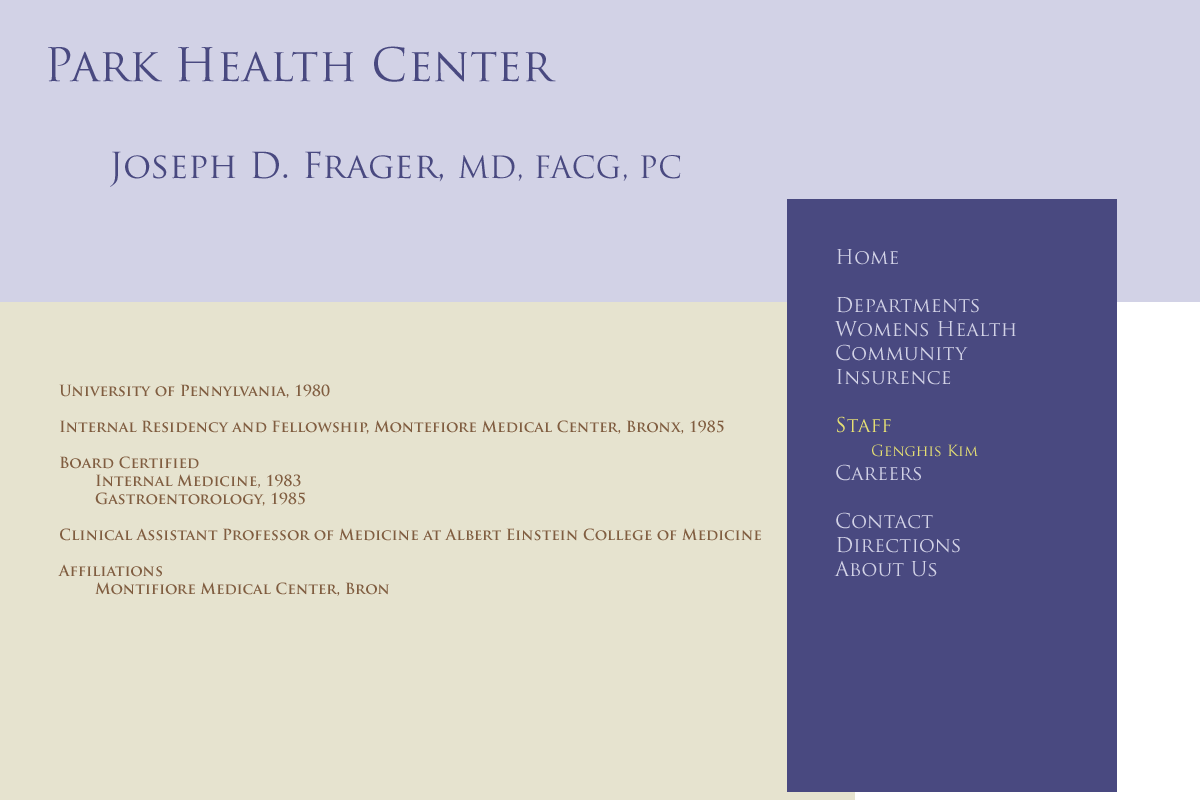
<style>
.page{position:relative;width:1200px;height:800px;background:#e6e3cf}
.page>*{position:absolute;margin:0}
.t1{font:45px "TrajanPro-Regular";color:#494980}
.t2{font:35px "TrajanPro-Regular";color:#494980}
.t3{font:30px "TrajanPro-Regular";color:#494980}
.t4{font:20px "TrajanPro-Regular";color:#d2d2e6}
.t5{font:20px "TrajanPro-Regular";color:#e6e073}
.t6{font:15px "TrajanPro-Regular";color:#e6e073}
.t7{font:15px "TrajanPro-Bold";color:#805d40}
</style>
<div class="page">
<p class="t1" style="left:48px;top:46px;width:508px;height:36px">Park Health Center</p>
<p class="t2" style="left:110px;top:151px;width:571px;height:36px">Joseph D. Frager, <span class="t3">MD, FACG, PC</span></p>
<p class="t4" style="left:834px;top:249px;width:182px;height:328px">Home<br><br>Departments<br>Womens Health<br>Community<br>Insurence<br><br><span class="t5">Staff<br> </span><span class="t6">Genghis Kim<br></span>Careers<br><br>Contact<br>Directions<br>About Us</p>
<p class="t7" style="left:58px;top:384px;width:703px;height:212px">University of Pennylvania, 1980<br><br>Internal Residency and Fellowship, Montefiore Medical Center, Bronx, 1985<br><br>Board Certified<br> Internal Medicine, 1983<br> Gastroentorology, 1985<br><br>Clinical Assistant Professor of Medicine at Albert Einstein College of Medicine<br><br>Affiliations<br> Montifiore Medical Center, Bron</p>
</div>
